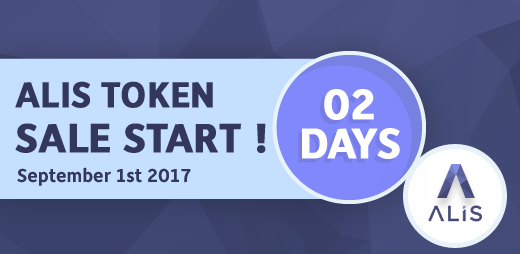
<style>
.page{position:relative;width:520px;height:254px;background:#c5dfff}
.page>*{position:absolute;margin:0}
.t1{font:41px/45.1px "Depot-Bold";color:#33375c;text-transform:uppercase;font-weight:bold}
.t2{font:36.3px/45.1px "Depot-Bold";color:#33375c;text-transform:uppercase;font-weight:bold}
.t3{font:43px/39px "Depot-Bold";letter-spacing:-0.02em;color:#ffffff;text-transform:uppercase;font-weight:bold}
.t4{font:43px/39px "Depot-Bold";letter-spacing:-0.02em;text-transform:uppercase;font-weight:bold}
.t5{font:19px "Depot-Bold";color:#33375c}
</style>
<div class="page">
<p class="t1" style="left:15px;top:81px;width:251px;height:72px"><span class="t2">ALIS TOKEN<br></span>SALE START !</p>
<p class="t3" style="left:302px;top:89px;width:98px;height:70px;text-align:center">02<br>Days</p>
<p class="t4" style="left:298px;top:93px;width:98px;height:70px;text-align:center">02<br>Days</p>
<p class="t5" style="left:17px;top:167px;width:174px;height:19px">September 1st 2017</p>
</div>
